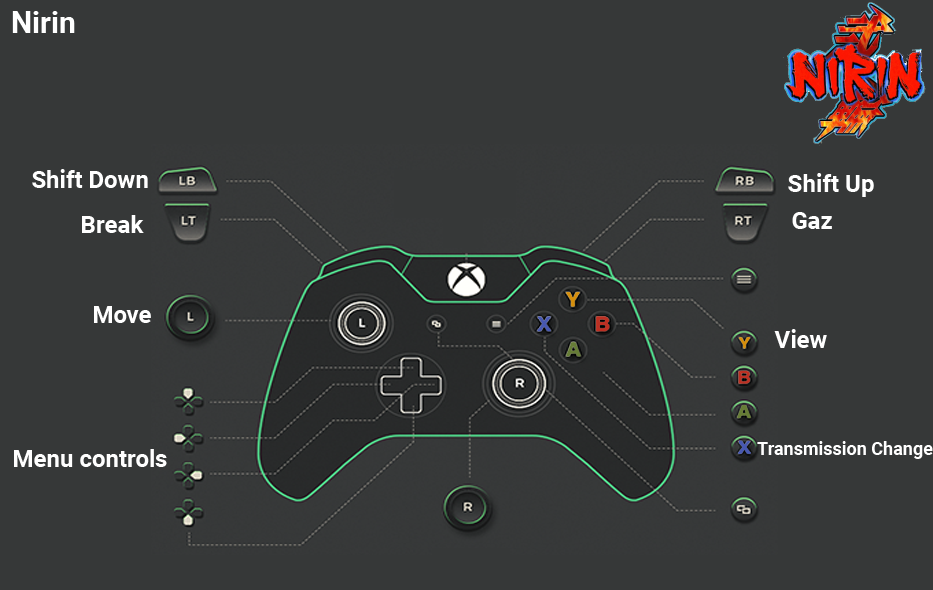
<style>
.page{position:relative;width:933px;height:590px;background:#363838}
.page>*{position:absolute;margin:0}
.t1{font:30px "Roboto-Bold";color:#ffffff}
.t2{font:24px "Roboto-Bold";color:#ffffff}
.t3{font:18px "Roboto-Bold";color:#ffffff}
</style>
<div class="page">
<p class="t1" style="left:12px;top:11px;width:63px;height:22px">Nirin</p>
<p class="t2" style="left:32px;top:169px;width:116px;height:19px">Shift Down</p>
<p class="t2" style="left:788px;top:173px;width:86px;height:24px">Shift Up</p>
<p class="t2" style="left:82px;top:215px;width:62px;height:18px">Break</p>
<p class="t2" style="left:792px;top:212px;width:40px;height:17px">Gaz</p>
<p class="t2" style="left:94px;top:306px;width:57px;height:17px">Move</p>
<p class="t2" style="left:774px;top:329px;width:53px;height:19px">View</p>
<p class="t2" style="left:14px;top:449px;width:153px;height:18px">Menu controls</p>
<p class="t3" style="left:757px;top:441px;width:176px;height:18px">Transmission Change</p>
</div>
